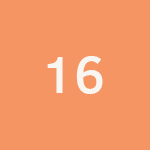
<style>
.page{position:relative;width:150px;height:150px;background:#f59563}
.page>*{position:absolute;margin:0}
.t1{font:52.9px "ClearSans-Medium";color:#f9f6f2}
</style>
<div class="page">
<p class="t1" style="left:47px;top:56px;width:56px;height:38px">16</p>
</div>
